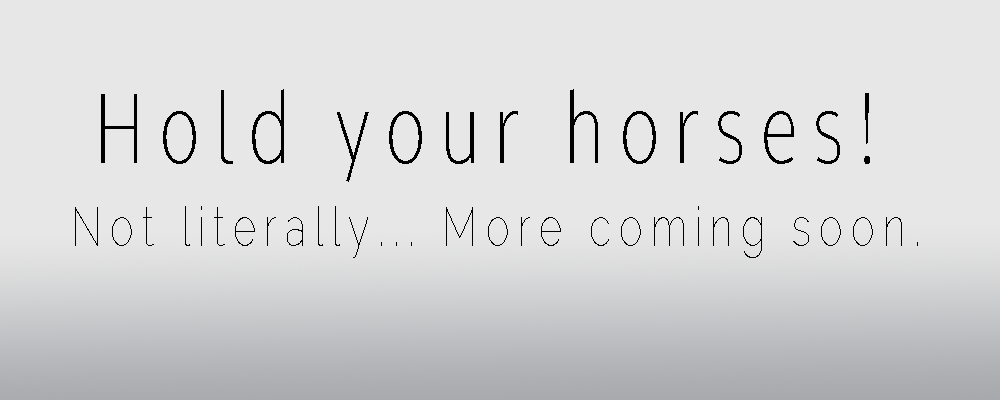
<style>
.page{position:relative;width:1000px;height:400px;background:#e7e7e7}
.page>*{position:absolute;margin:0}
.t1{font:96.2px "Comme-Thin";letter-spacing:0.2em;color:#000000;scale:0.73 1}
.t2{font:55px "Raleway-Thin";letter-spacing:0.2em;color:#000000;scale:0.73 1}
</style>
<div class="page">
<p class="t1" style="left:101px;top:89px;width:769px;height:93px">Hold your horses!</p>
<p class="t2" style="left:75px;top:206px;width:843px;height:52px">Not literally... More coming soon.</p>
</div>
